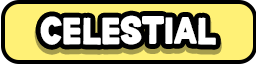
<style>
.page{position:relative;width:256px;height:64px;background:#fff176}
.page>*{position:absolute;margin:0}
.t1{font:39.2px "DERRICKRegular";color:#ffffff}
</style>
<div class="page">
<p class="t1" style="left:40px;top:15px;width:176px;height:30px">CELESTIAL</p>
</div>
